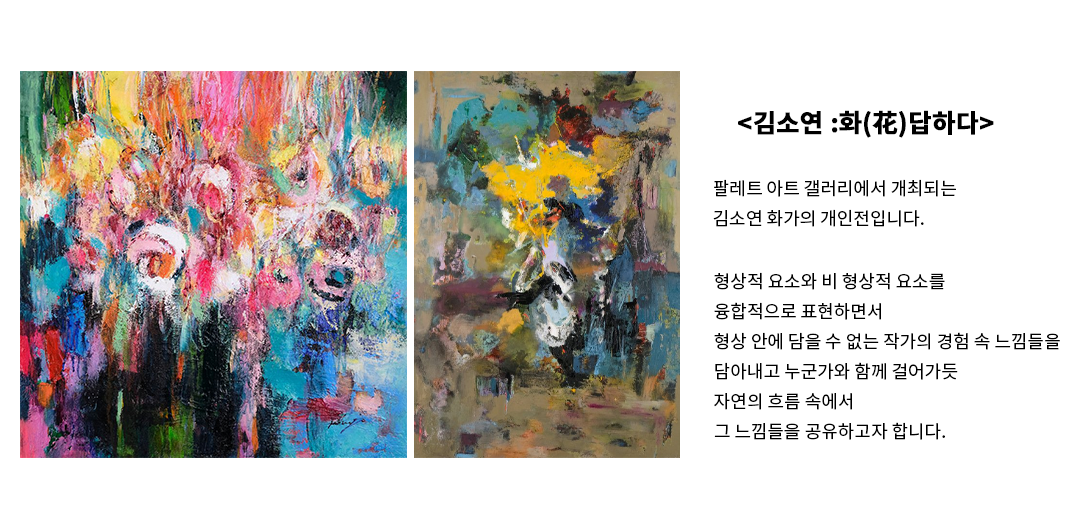
<style>
.page{position:relative;width:1089px;height:529px;background:#ffffff}
.page>*{position:absolute;margin:0}
.t1{font:25px "NotoSansKR-Bold";color:#000000;font-weight:bold}
.t2{font:18px/30px "NotoSansKR-Regular";color:#000000}
</style>
<div class="page">
<p class="t1" style="left:738px;top:110px;width:256px;height:28px">&lt;김소연 :화(花)답하다&gt;</p>
<p class="t2" style="left:713px;top:179px;width:243px;height:48px">팔레트 아트 갤러리에서 개최되는 <br>김소연 화가의 개인전입니다.</p>
<p class="t2" style="left:714px;top:272px;width:346px;height:168px">형상적 요소와 비 형상적 요소를 <br>융합적으로 표현하면서 <br>형상 안에 담을 수 없는 작가의 경험 속 느낌들을 <br>담아내고 누군가와 함께 걸어가듯 <br>자연의 흐름 속에서 <br>그 느낌들을 공유하고자 합니다.</p>
</div>
